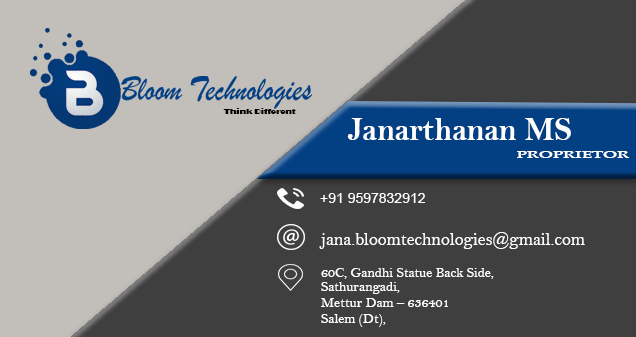
<style>
.page{position:relative;width:636px;height:337px;background:#3f3f3f}
.page>*{position:absolute;margin:0}
.t1{font:7.3px "Broadway";color:#000000;scale:1.17 1}
.t2{font:34.1px "BellMTBold";color:#ffffff;scale:0.93 1}
.t3{font:10px "BookAntiqua-Bold";color:#ffffff;text-transform:uppercase;scale:1.68 1}
.t4{font:14px "ArialMT";color:#ffffff}
.t5{font:18px "BellMT";color:#ffffff}
.t6{font:14px/14px "BellMT";color:#ffffff}
.t7{font:14px/8px "BellMT";color:#ffffff}
</style>
<div class="page">
<p class="t1" style="left:223px;top:108px;width:73px;height:6px">Think Different</p>
<p class="t2" style="left:347px;top:118px;width:224px;height:22px">Janarthanan MS</p>
<p class="t3" style="left:517px;top:151px;width:113px;height:7px">proprietor</p>
<p class="t4" style="left:320px;top:193px;width:105px;height:10px">+91 9597832912</p>
<p class="t5" style="left:319px;top:232px;width:266px;height:17px">jana.bloomtechnologies@gmail.com</p>
<p class="t6" style="left:321px;top:268px;width:173px;height:59px">60C, Gandhi Statue Back Side,<br>Sathurangadi,<br><span class="t7">    <br>Mettur Dam – 636401<br><br>Salem (Dt),</span></p>
</div>
